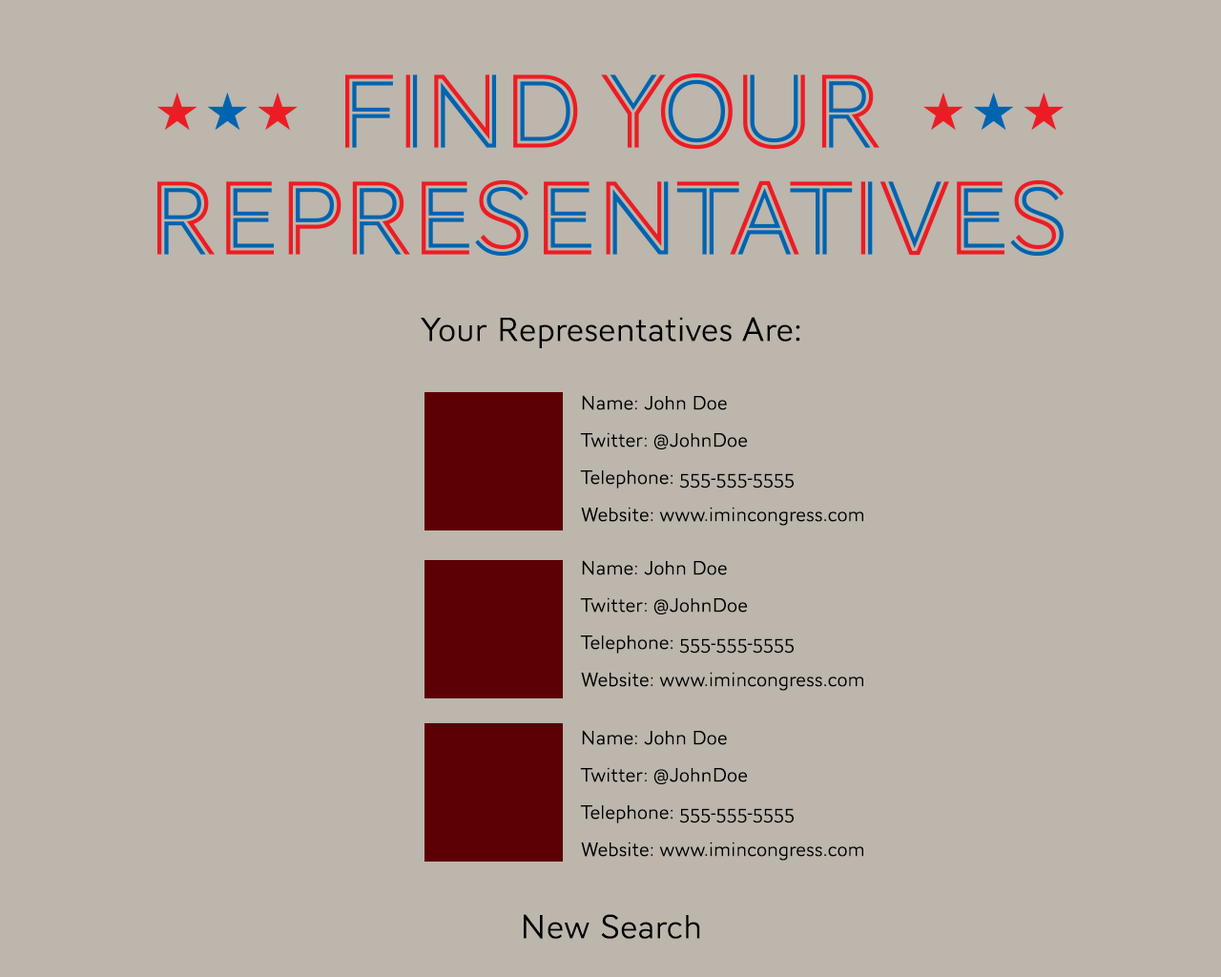
<style>
.page{position:relative;width:1221px;height:977px;background:#bcb6ac}
.page>*{position:absolute;margin:0}
.t1{font:34.3px "AWConquerorSans-Light";color:#000000}
.t2{font:20px/37.2px "AWConquerorSans-Light";color:#000000}
</style>
<div class="page">
<p class="t1" style="left:421px;top:317px;width:379px;height:31px">Your Representatives Are:</p>
<p class="t2" style="left:580px;top:395px;width:283px;height:131px">Name: John Doe<br>Twitter: @JohnDoe<br>Telephone: 555-555-5555<br>Website: www.imincongress.com</p>
<p class="t2" style="left:580px;top:560px;width:283px;height:131px">Name: John Doe<br>Twitter: @JohnDoe<br>Telephone: 555-555-5555<br>Website: www.imincongress.com</p>
<p class="t2" style="left:580px;top:730px;width:283px;height:130px">Name: John Doe<br>Twitter: @JohnDoe<br>Telephone: 555-555-5555<br>Website: www.imincongress.com</p>
<p class="t1" style="left:524px;top:914px;width:176px;height:25px">New Search</p>
</div>
